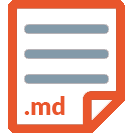
<style>
.page{position:relative;width:133px;height:133px;background:#ffffff}
.page>*{position:absolute;margin:0}
.t1{font:25px "Lato-Black";color:#e9562c}
</style>
<div class="page">
<p class="t1" style="left:24px;top:96px;width:41px;height:19px">.md</p>
</div>
